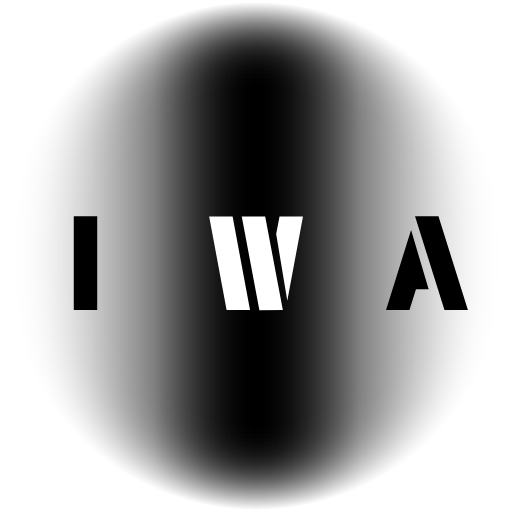
<style>
.page{position:relative;width:512px;height:512px;background:#ffffff}
.page>*{position:absolute;margin:0}
.t1{font:150px "MajorSnafu";color:#000000}
.t2{font:150px "MajorSnafu";color:#ffffff}
</style>
<div class="page">
<p class="t1" style="left:73px;top:216px;width:25px;height:95px">I</p>
<p class="t2" style="left:209px;top:216px;width:94px;height:95px">W</p>
<p class="t1" style="left:386px;top:216px;width:82px;height:95px">A</p>
</div>
